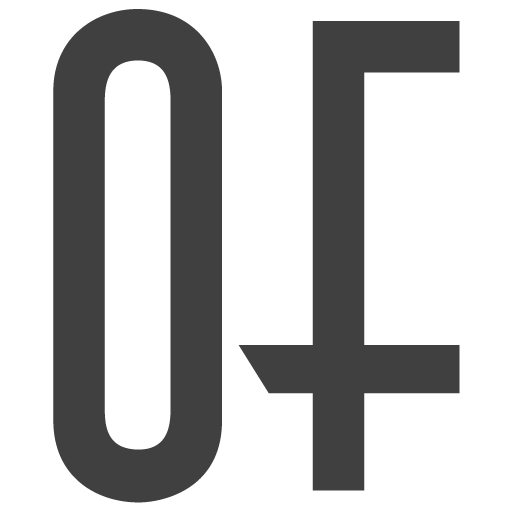
<style>
.page{position:relative;width:512px;height:512px;background:#ffffff}
.page>*{position:absolute;margin:0}
.t1{font:666.7px "AnnaStd";color:#404040}
</style>
<div class="page">
<p class="t1" style="left:53px;top:9px;width:407px;height:494px">of</p>
</div>
